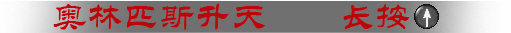
<style>
.page{position:relative;width:511px;height:33px;background:#707070}
.page>*{position:absolute;margin:0}
.t1{font:36px "STLiti";color:#ba060b}
</style>
<div class="page">
<p class="t1" style="left:53px;top:3px;width:357px;height:27px">奥林匹斯升天  长按</p>
</div>
